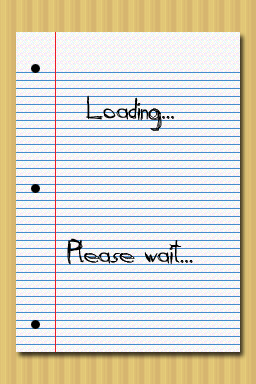
<style>
.page{position:relative;width:256px;height:384px}
.page>*{position:absolute;margin:0}
.t1{font:30px "Daubed";color:#000000}
</style>
<div class="page">
<p class="t1" style="left:86px;top:95px;width:88px;height:36px">Loading...</p>
<p class="t1" style="left:67px;top:238px;width:126px;height:27px">Please wait...</p>
</div>
